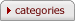
<style>
.page{position:relative;width:75px;height:21px;background:#e9e8e8}
.page>*{position:absolute;margin:0}
.t1{font:10px "Verdana";letter-spacing:-0.02em;color:#660000}
</style>
<div class="page">
<p class="t1" style="left:15px;top:6px;width:50px;height:10px">categories</p>
</div>
